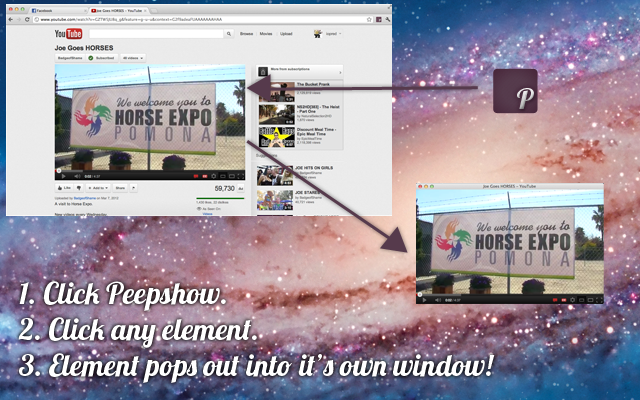
<style>
.page{position:relative;width:640px;height:400px}
.page>*{position:absolute;margin:0}
.t1{font:30px "Lobster1.4";color:#ffffff}
</style>
<div class="page">
<p class="t1" style="left:18px;top:281px;width:477px;height:102px">1. Click Peepshow.<br>2. Click any element.<br>3. Element pops out into it’s own window!</p>
</div>
